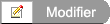
<style>
.page{position:relative;width:110px;height:24px;background:#999999}
.page>*{position:absolute;margin:0}
.t1{font:14px "ArialMT";color:#ffffff}
</style>
<div class="page">
<p class="t1" style="left:46px;top:5px;width:50px;height:17px">Modifier</p>
</div>
